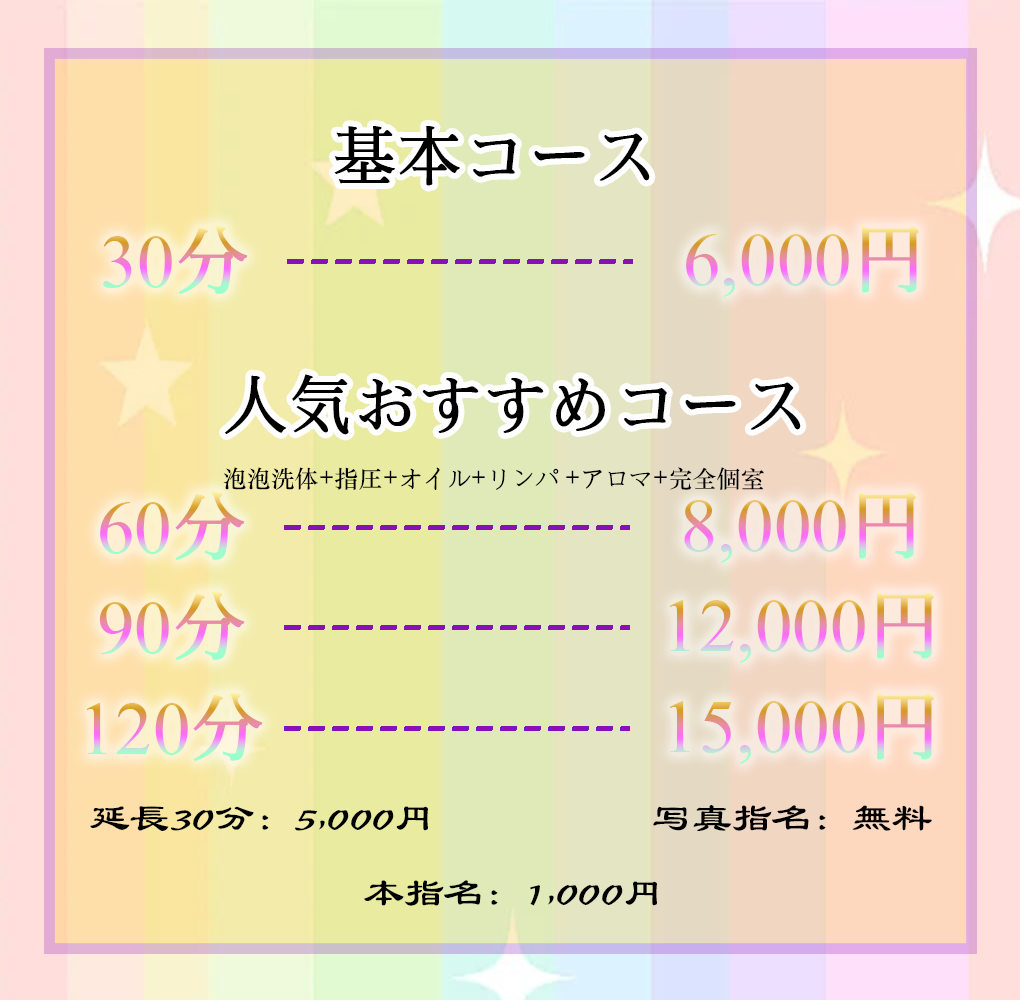
<style>
.page{position:relative;width:1020px;height:1000px}
.page>*{position:absolute;margin:0}
.t1{font:65px "SimSong-Bold";color:#000000}
.t2{font:75px "TimesNewRomanPSMT"}
.t3{font:75px "SimSong-Bold"}
.t4{font:24px "STSongti-SC-Bold";color:#000000}
.t5{font:40px "STBaoliSC-Regular";color:#000000}
</style>
<div class="page">
<p class="t1" style="left:334px;top:126px;width:316px;height:60px">基本コース</p>
<p class="t2" style="left:103px;top:225px;width:145px;height:69px">30<span class="t3">分</span></p>
<p class="t2" style="left:686px;top:226px;width:233px;height:71px"><span class="t3"> </span>6,000<span class="t3">円</span></p>
<p class="t1" style="left:224px;top:374px;width:577px;height:61px">人気おすすめコース</p>
<p class="t4" style="left:223px;top:467px;width:541px;height:23px">泡泡洗体+指圧+オイル+リンパ +アロマ+完全個室</p>
<p class="t2" style="left:100px;top:491px;width:145px;height:69px">60<span class="t3">分</span></p>
<p class="t2" style="left:684px;top:492px;width:232px;height:71px"><span class="t3"> </span>8,000<span class="t3">円</span></p>
<p class="t2" style="left:99px;top:591px;width:146px;height:69px">90<span class="t3">分</span></p>
<p class="t2" style="left:669px;top:592px;width:265px;height:71px"><span class="t3"> </span>12,000<span class="t3">円</span></p>
<p class="t2" style="left:86px;top:692px;width:177px;height:69px">120<span class="t3">分</span></p>
<p class="t2" style="left:669px;top:693px;width:265px;height:71px"><span class="t3"> </span>15,000<span class="t3">円</span></p>
<p class="t5" style="left:90px;top:806px;width:338px;height:25px">延長30分：5,000円</p>
<p class="t5" style="left:653px;top:805px;width:279px;height:26px">写真指名：無料</p>
<p class="t5" style="left:364px;top:880px;width:293px;height:26px">本指名：1,000円</p>
</div>
